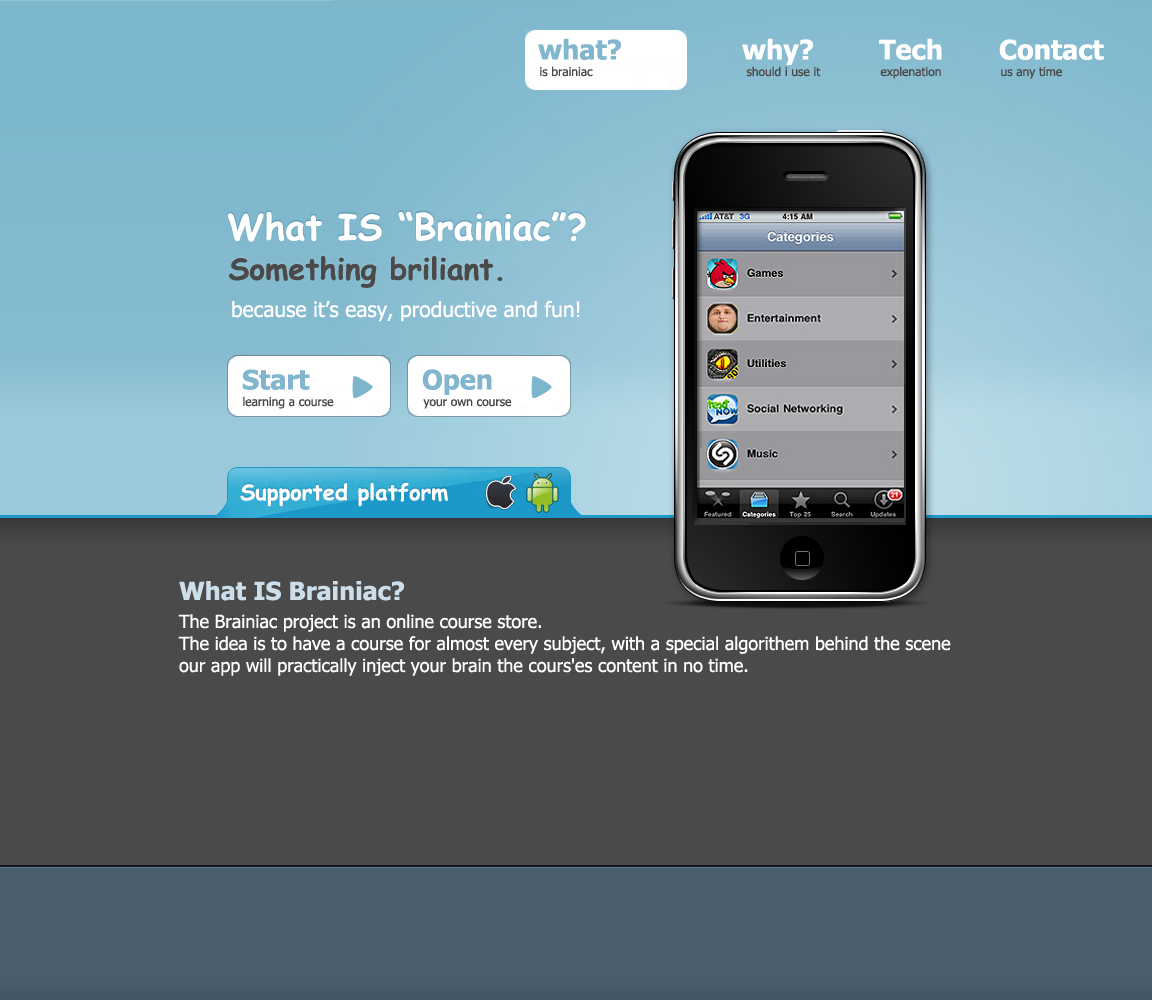
<style>
.page{position:relative;width:1152px;height:1000px;background:#4a4a4a}
.page>*{position:absolute;margin:0}
.t1{font:27px "Tahoma-Bold";color:#82b6ce}
.t2{font:27px "Tahoma-Bold";color:#ffffff}
.t3{font:12px "Tahoma";color:#4a4a4a}
.t4{font:36px "ComicSansMS-Bold";color:#ffffff}
.t5{font:30px "ComicSansMS-Bold";color:#4a4a4a}
.t6{font:21px "Tahoma";color:#ffffff}
.t7{font:22px "ComicSansMS-Bold";color:#ffffff}
.t8{font:25px "Tahoma-Bold";color:#ccdee9}
.t9{font:18px/22px "Tahoma";color:#ffffff}
</style>
<div class="page">
<p class="t1" style="left:538px;top:38px;width:83px;height:22px">what?</p>
<p class="t2" style="left:742px;top:38px;width:72px;height:27px">why?</p>
<p class="t2" style="left:879px;top:38px;width:63px;height:22px">Tech</p>
<p class="t2" style="left:999px;top:39px;width:105px;height:21px">Contact</p>
<p class="t3" style="left:540px;top:66px;width:53px;height:11px">is brainiac</p>
<p class="t3" style="left:746px;top:66px;width:75px;height:11px">should i use it</p>
<p class="t3" style="left:880px;top:66px;width:61px;height:13px">explenation</p>
<p class="t3" style="left:1001px;top:67px;width:61px;height:12px">us any time</p>
<p class="t4" style="left:227px;top:211px;width:359px;height:31px">What IS “Brainiac”?</p>
<p class="t5" style="left:229px;top:255px;width:274px;height:33px">Something briliant.</p>
<p class="t6" style="left:232px;top:300px;width:348px;height:22px">because it’s easy, productive and fun!</p>
<p class="t1" style="left:242px;top:369px;width:68px;height:21px">Start</p>
<p class="t1" style="left:422px;top:369px;width:70px;height:26px">Open</p>
<p class="t3" style="left:243px;top:396px;width:91px;height:13px">learning a course</p>
<p class="t3" style="left:423px;top:399px;width:89px;height:10px">your own course</p>
<p class="t7" style="left:240px;top:482px;width:208px;height:25px">Supported platform</p>
<p class="t8" style="left:179px;top:581px;width:226px;height:20px">What IS Brainiac?</p>
<p class="t9" style="left:178px;top:614px;width:773px;height:62px;text-align:justify">The Brainiac project is an online course store. <br>The idea is to have a course for almost every subject, with a special algorithem behind the scene <br>our app will practically inject your brain the cours'es content in no time.</p>
</div>
